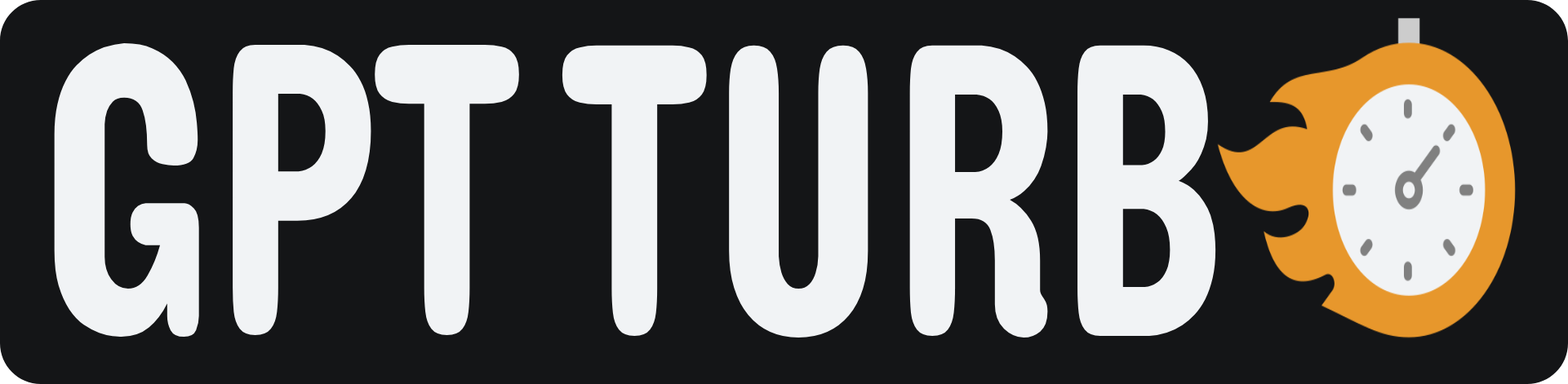
<style>
.page{position:relative;width:1568px;height:384px;background:#141517}
.page>*{position:absolute;margin:0}
.t1{font:425px "Dangrek-Regular";color:#f1f3f5;scale:0.72 1}
.t2{font:425.2px "Dangrek-Regular";color:#f1f3f5;scale:0.72 1}
</style>
<div class="page">
<p class="t1" style="left:54px;top:43px;width:465px;height:295px">GPT</p>
<p class="t2" style="left:562px;top:45px;width:654px;height:293px">TURB</p>
</div>
